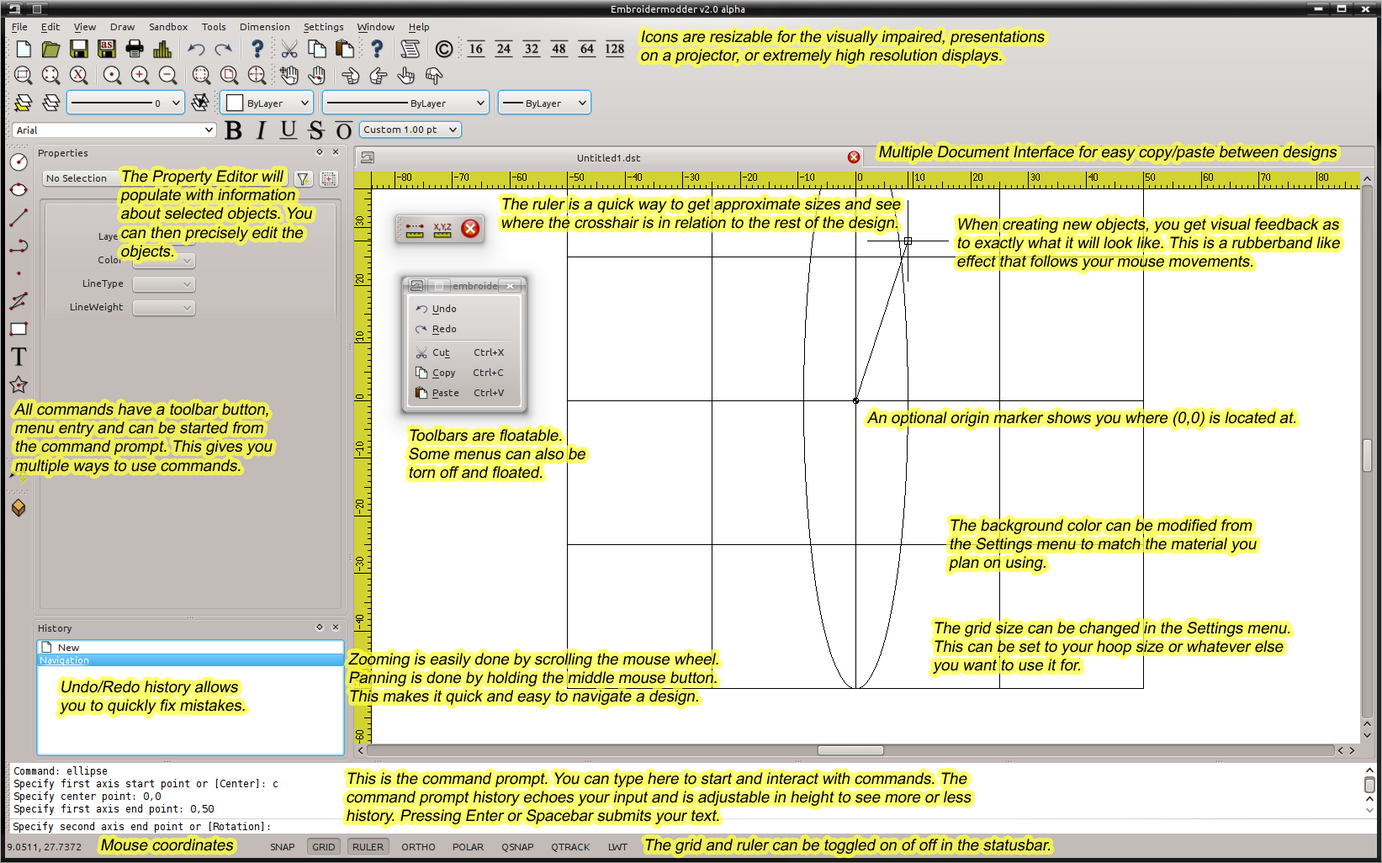
<style>
.page{position:relative;width:1382px;height:863px;background:#ffffff}
.page>*{position:absolute;margin:0}
.t1{font:15.7px "ArialMT";color:#000000;font-style:italic}
</style>
<div class="page">
<p class="t1" style="left:641px;top:30px;width:404px;height:34px">Icons are resizable for the visually impaired, presentations on a projector, or extremely high resolution displays.</p>
<p class="t1" style="left:879px;top:146px;width:457px;height:15px">Multiple Document Interface for easy copy/paste between designs</p>
<p class="t1" style="left:120px;top:170px;width:192px;height:90px">The Property Editor will populate with information about selected objects. You can then precisely edit the objects.</p>
<p class="t1" style="left:501px;top:198px;width:400px;height:33px">The ruler is a quick way to get approximate sizes and see where the crosshair is in relation to the rest of the design.</p>
<p class="t1" style="left:957px;top:218px;width:383px;height:52px">When creating new objects, you get visual feedback as to exactly what it will look like. This is a rubberband like effect that follows your mouse movements.</p>
<p class="t1" style="left:14px;top:403px;width:259px;height:71px">All commands have a toolbar button, menu entry and can be started from the command prompt. This gives you multiple ways to use commands.</p>
<p class="t1" style="left:867px;top:411px;width:429px;height:15px">An optional origin marker shows you where (0,0) is located at.</p>
<p class="t1" style="left:409px;top:429px;width:176px;height:50px">Toolbars are floatable. <br>Some menus can also be torn off and floated.</p>
<p class="t1" style="left:949px;top:519px;width:308px;height:52px">The background color can be modified from the Settings menu to match the material you plan on using.</p>
<p class="t1" style="left:933px;top:622px;width:357px;height:52px">The grid size can be changed in the Settings menu. This can be set to your hoop size or whatever else you want to use it for.</p>
<p class="t1" style="left:348px;top:653px;width:370px;height:52px">Zooming is easily done by scrolling the mouse wheel. Panning is done by holding the middle mouse button. This makes it quick and easy to navigate a design.</p>
<p class="t1" style="left:60px;top:680px;width:185px;height:34px">Undo/Redo history allows you to quickly fix mistakes.</p>
<p class="t1" style="left:347px;top:772px;width:624px;height:52px">This is the command prompt. You can type here to start and interact with commands. The command prompt history echoes your input and is adjustable in height to see more or less history. Pressing Enter or Spacebar submits your text.</p>
<p class="t1" style="left:101px;top:839px;width:132px;height:12px">Mouse coordinates</p>
<p class="t1" style="left:645px;top:839px;width:405px;height:15px">The grid and ruler can be toggled on of off in the statusbar.</p>
</div>
